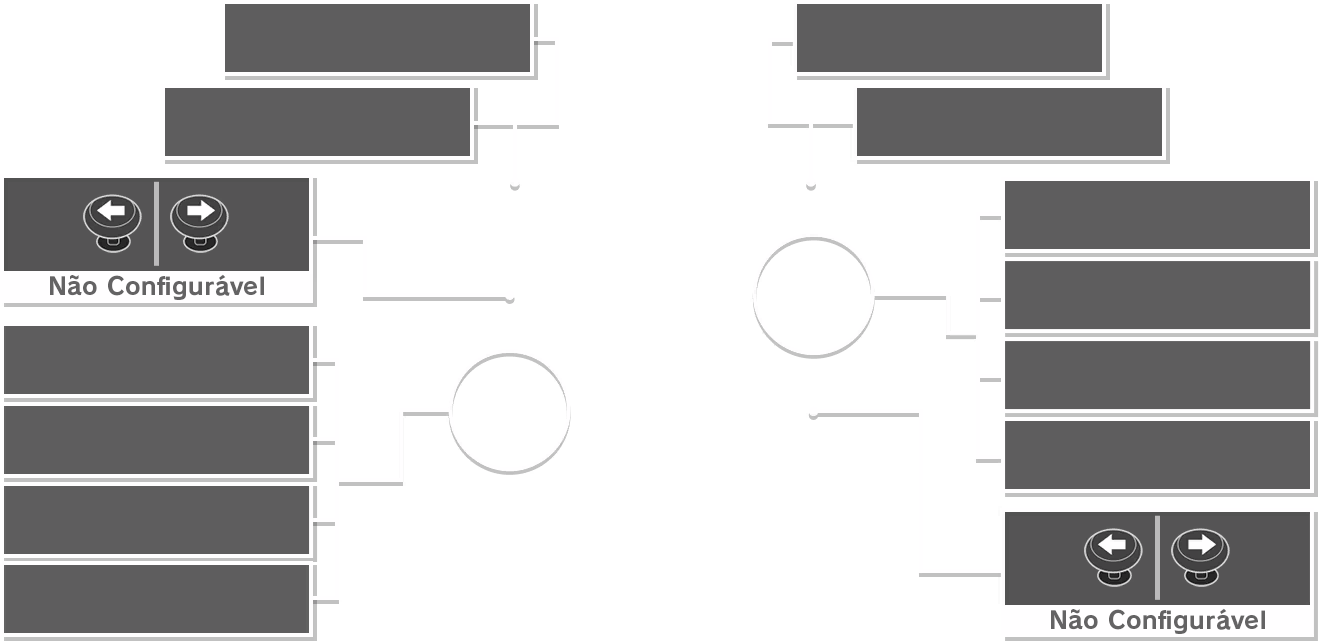
<style>
.page{position:relative;width:1319px;height:641px;background:#ffffff}
.page>*{position:absolute;margin:0}
.t1{font:24px "RodinPro-B";letter-spacing:0.021em;color:#646364}
</style>
<div class="page">
<p class="t1" style="left:50px;top:274px;width:214px;height:26px">Não Configurável</p>
<p class="t1" style="left:1051px;top:608px;width:214px;height:26px">Não Configurável</p>
</div>
